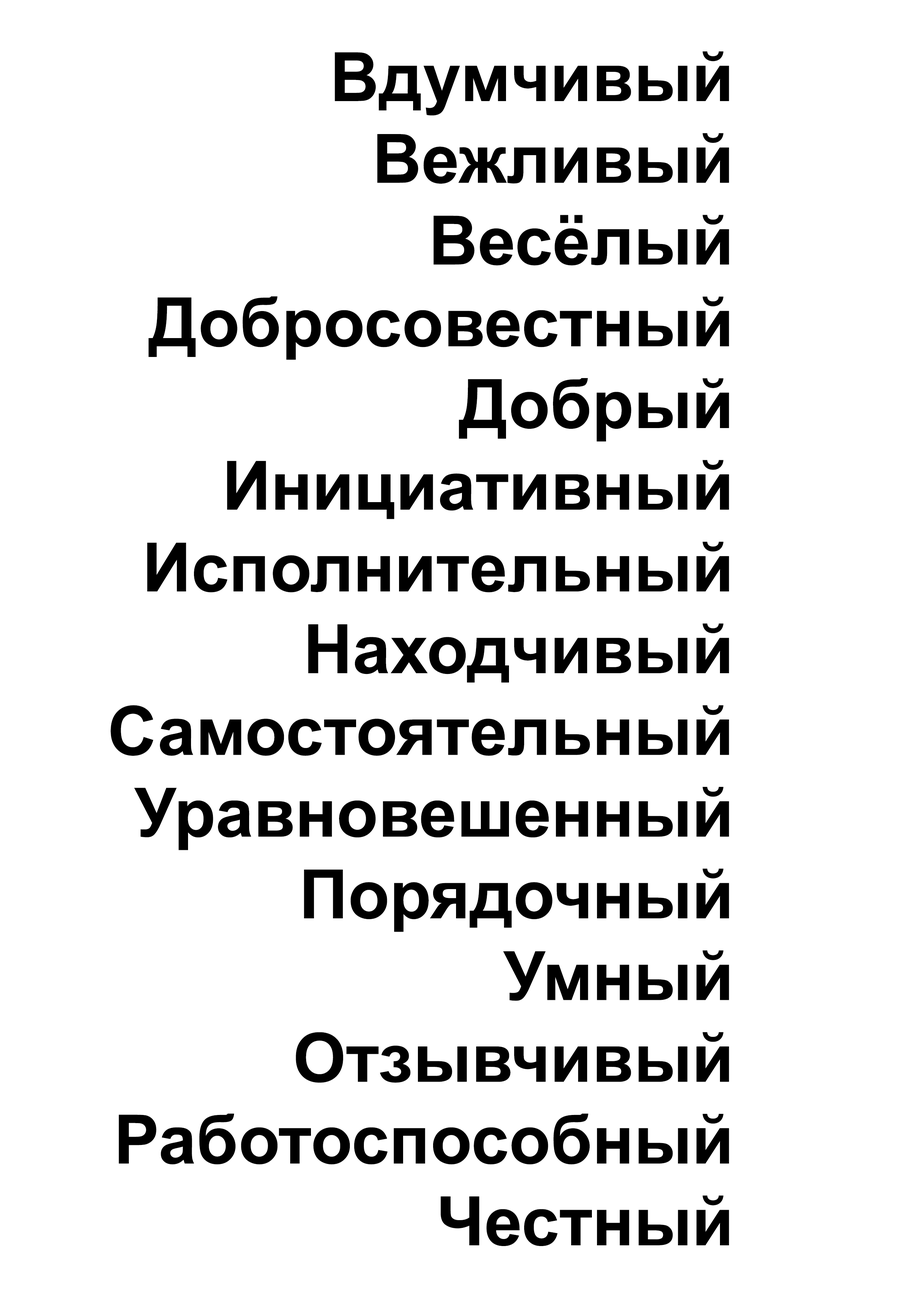
<style>
.page{position:relative;width:918px;height:1299px;background:#ffffff}
.page>*{position:absolute;margin:0}
.t1{font:68.1px "Arial-BoldMT";color:#000000}
</style>
<div class="page">
<p class="t1" style="left:111px;top:51px;width:618px;height:1195px;text-align:right">Вдумчивый<br>Вежливый<br>Весёлый<br>Добросовестный<br>Добрый<br>Инициативный<br>Исполнительный<br>Находчивый<br>Самостоятельный<br>Уравновешенный<br>Порядочный<br>Умный<br>Отзывчивый<br>Работоспособный<br>Честный</p>
</div>
